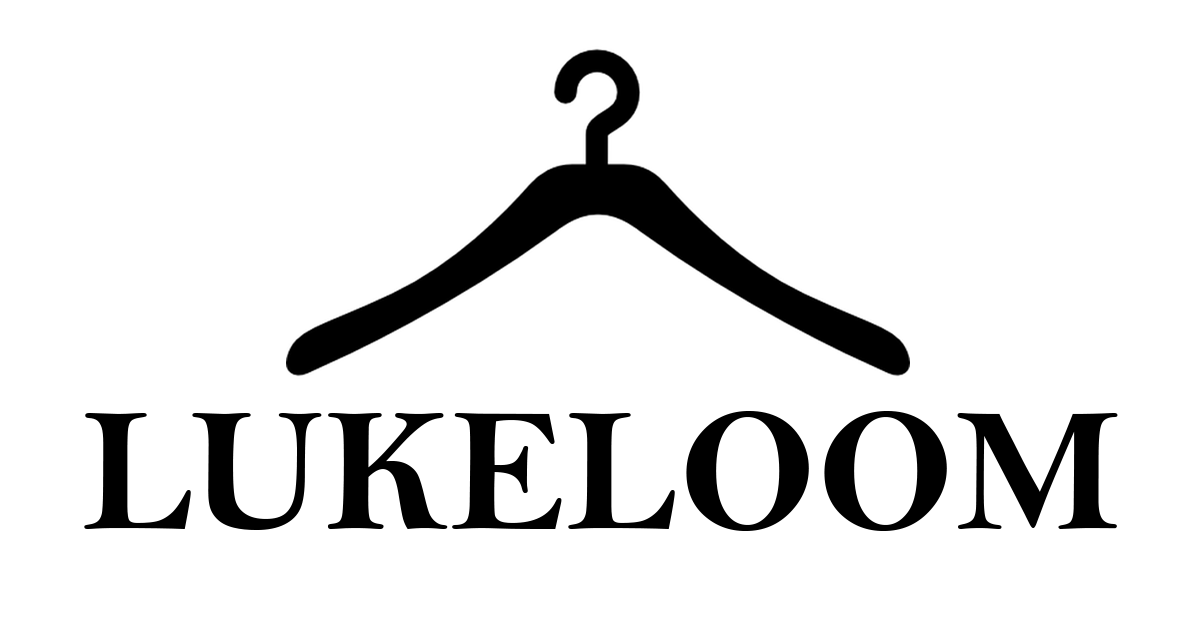
<style>
.page{position:relative;width:1200px;height:630px;background:#ffffff}
.page>*{position:absolute;margin:0}
.t1{font:178.3px "BellMTBold";color:#000000}
</style>
<div class="page">
<p class="t1" style="left:84px;top:411px;width:1034px;height:120px">LUKELOOM</p>
</div>
